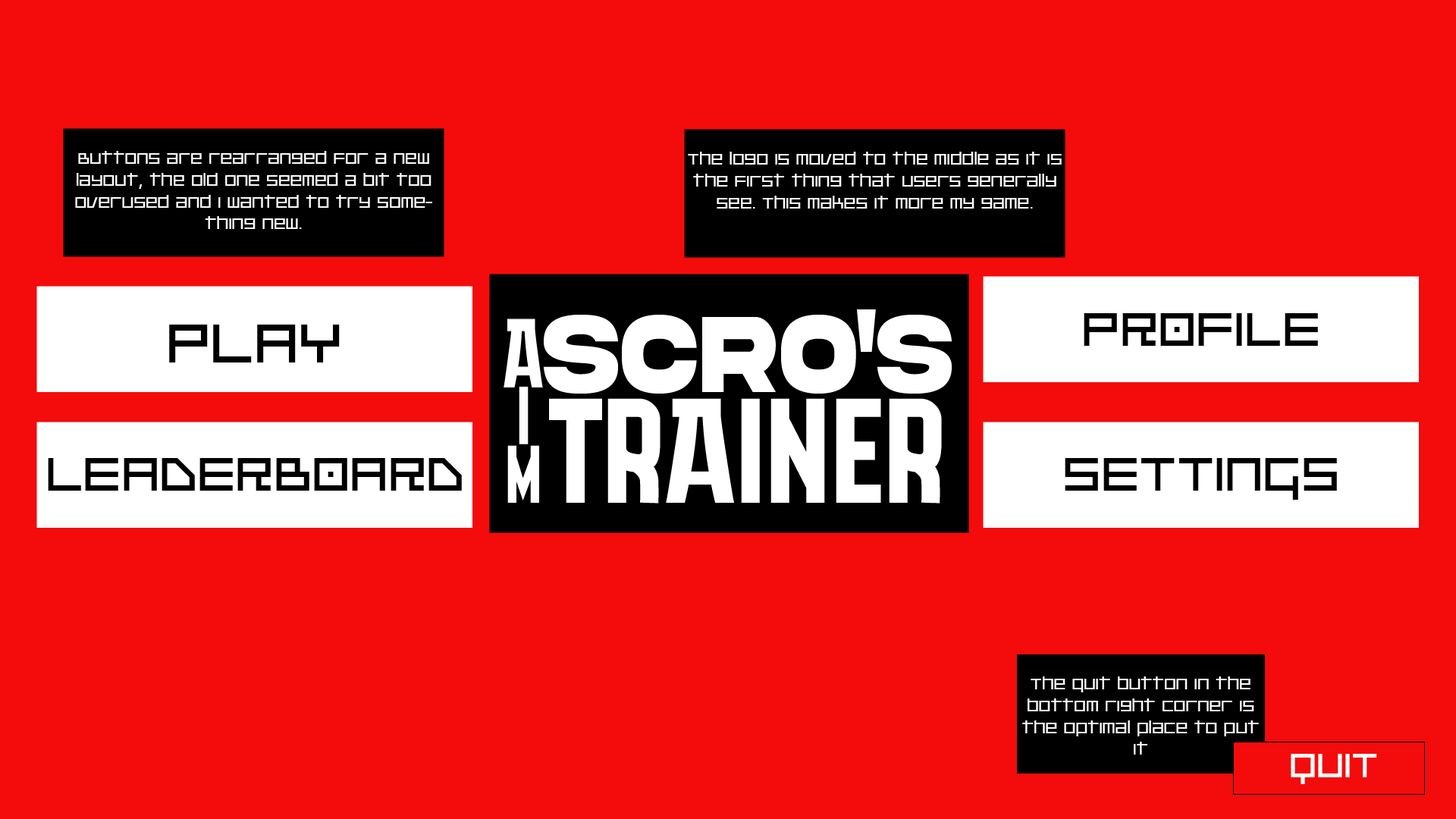
<style>
.page{position:relative;width:1456px;height:819px;background:#f40b0b}
.page>*{position:absolute;margin:0}
.t1{font:18.2px "PlatinumBeatBTN";color:#ffffff}
.t2{font:58.5px "PlatinumBeatBTN";color:#000000}
.t3{font:67.6px "PlatinumBeatBTN";color:#000000}
.t4{font:41.7px "PlatinumBeatBTN";color:#ffffff}
</style>
<div class="page">
<p class="t1" style="left:75px;top:151px;width:357px;height:78px;text-align:center">Buttons are rearranged for a new layout, the old one seemed a bit too overused and I wanted to try something new.</p>
<p class="t1" style="left:688px;top:152px;width:374px;height:57px;text-align:center">The logo is moved to the middle as it is the first thing that users generally see. This makes it more my game.</p>
<p class="t2" style="left:1084px;top:313px;width:234px;height:33px">PROFILE</p>
<p class="t3" style="left:169px;top:325px;width:171px;height:37px">PLAY</p>
<p class="t2" style="left:48px;top:458px;width:414px;height:33px">LEADERBOARD</p>
<p class="t2" style="left:1065px;top:458px;width:272px;height:42px">SETTINGS</p>
<p class="t1" style="left:1022px;top:676px;width:237px;height:79px;text-align:center">The quit button in the bottom right corner is the optimal place to put it</p>
<p class="t4" style="left:1291px;top:754px;width:86px;height:30px">QUIT</p>
</div>
